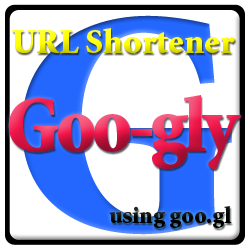
<style>
.page{position:relative;width:250px;height:250px;background:#ffffff}
.page>*{position:absolute;margin:0}
.t1{font:320px "MinionStd-Black"}
.t2{font:35px "MinionStd-Black"}
.t3{font:80px "MinionStd-Black";letter-spacing:-0.04em;scale:0.95 1}
.t4{font:24px "MinionStd-Black";color:#000000}
</style>
<div class="page">
<p class="t1" style="left:22px;top:15px;width:210px;height:220px">G</p>
<p class="t2" style="left:12px;top:28px;width:223px;height:25px">URL Shortener</p>
<p class="t3" style="left:8px;top:95px;width:233px;height:74px">Goo-gly</p>
<p class="t4" style="left:109px;top:206px;width:123px;height:22px">using goo.gl</p>
</div>
